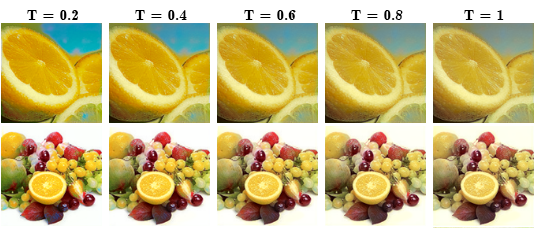
<style>
.page{position:relative;width:535px;height:230px}
.page>*{position:absolute;margin:0}
.t1{font:15.3px "Cmb10";color:#000000}
</style>
<div class="page">
<p class="t1" style="left:27px;top:10px;width:51px;height:10px">T = 0.2</p>
<p class="t1" style="left:135px;top:10px;width:52px;height:10px">T = 0.4</p>
<p class="t1" style="left:244px;top:10px;width:52px;height:10px">T = 0.6</p>
<p class="t1" style="left:351px;top:10px;width:52px;height:10px">T = 0.8</p>
<p class="t1" style="left:464px;top:10px;width:40px;height:10px">T = 1</p>
</div>
